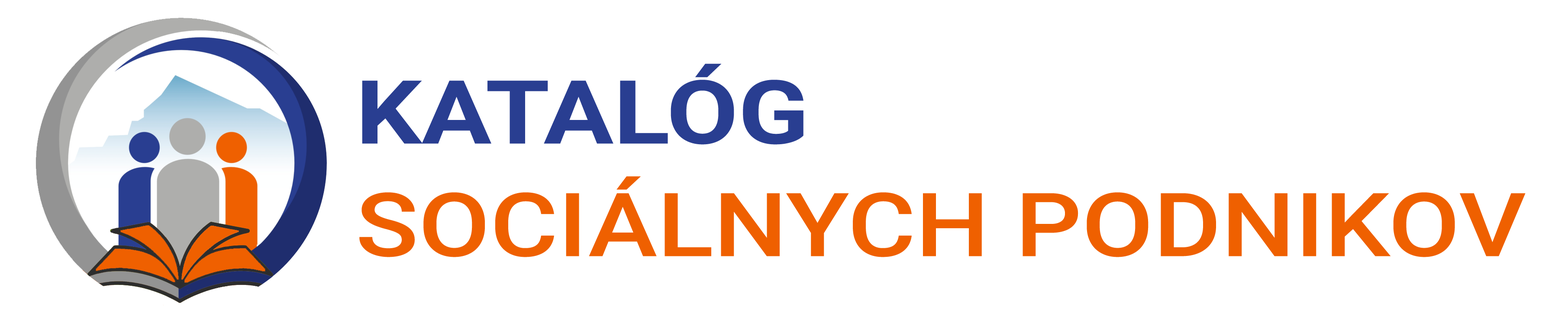
<style>
.page{position:relative;width:1568px;height:330px;background:#ffffff}
.page>*{position:absolute;margin:0}
.t1{font:88.3px/112.6px "Roboto-Medium";color:#ef6000;scale:1.18 1}
.t2{font:88.3px/112.6px "Roboto-Bold";color:#293e91;scale:1.18 1}
</style>
<div class="page">
<p class="t1" style="left:359px;top:64px;width:1167px;height:193px"><span class="t2">KATALÓG<br></span>SOCIÁLNYCH PODNIKOV</p>
</div>
